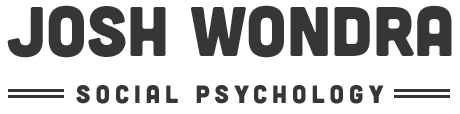
<style>
.page{position:relative;width:460px;height:114px;background:#ffffff}
.page>*{position:absolute;margin:0}
.t1{font:70px "Cubano-Regular";color:#363636}
.t2{font:25px "Cubano-Regular";letter-spacing:0.2em;color:#363636}
</style>
<div class="page">
<p class="t1" style="left:7px;top:5px;width:445px;height:53px">Josh wondra</p>
<p class="t2" style="left:76px;top:85px;width:308px;height:19px">social psychology</p>
</div>
